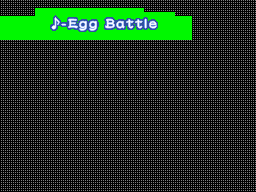
<style>
.page{position:relative;width:256px;height:192px;background:#000000}
.page>*{position:absolute;margin:0}
.t1{font:16.5px "DFLeiShoStd-W5";letter-spacing:0.075em;color:#ffffff}
.t2{font:13.3px "DFLeiShoStd-W5";color:#ffffff}
</style>
<div class="page">
<p class="t1" style="left:52px;top:17px;width:105px;height:14px"><span class="t2">♪</span>-Egg Battle</p>
</div>
